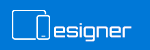
<style>
.page{position:relative;width:150px;height:50px;background:#0078d7}
.page>*{position:absolute;margin:0}
.t1{font:18px "Orbitron-Regular";color:#ffffff;font-weight:bold}
</style>
<div class="page">
<p class="t1" style="left:54px;top:23px;width:78px;height:19px">esigner</p>
</div>
